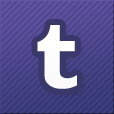
<style>
.page{position:relative;width:114px;height:114px}
.page>*{position:absolute;margin:0}
.t1{font:96px "BookmanOldStyle-Bold";letter-spacing:0.01em;color:#ffffff}
</style>
<div class="page">
<p class="t1" style="left:37px;top:25px;width:40px;height:64px">t</p>
</div>
